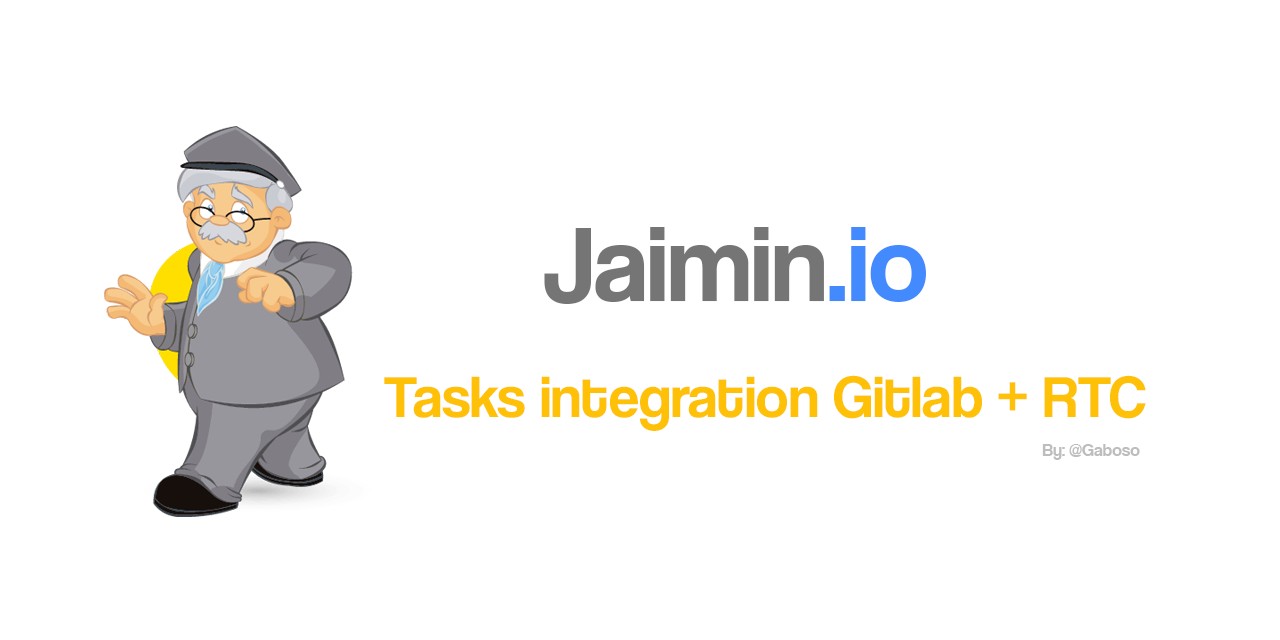
<style>
.page{position:relative;width:1280px;height:640px;background:#ffffff}
.page>*{position:absolute;margin:0}
.t1{font:110.2px "CoolveticaRg-Regular";color:#757575}
.t2{font:110.2px "CoolveticaRg-Regular";color:#448aff}
.t3{font:60.1px "CoolveticaRg-Regular";color:#ffc107}
.t4{font:18px "CoolveticaRg-Regular";color:#bdbdbd}
</style>
<div class="page">
<p class="t1" style="left:544px;top:227px;width:382px;height:77px">Jaimin<span class="t2">.io</span></p>
<p class="t3" style="left:384px;top:375px;width:762px;height:56px">Tasks integration Gitlab + RTC</p>
<p class="t4" style="left:1042px;top:444px;width:98px;height:16px">By: @Gaboso</p>
</div>
